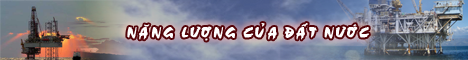
<style>
.page{position:relative;width:468px;height:60px}
.page>*{position:absolute;margin:0}
.t1{font:14.4px "HP-Cezanne-Regular";letter-spacing:0.1em;color:#ffffff;text-transform:uppercase;font-weight:bold}
</style>
<div class="page">
<p class="t1" style="left:127px;top:23px;width:242px;height:18px">naêng löôïng cuûa ñaát nöôùc</p>
</div>
